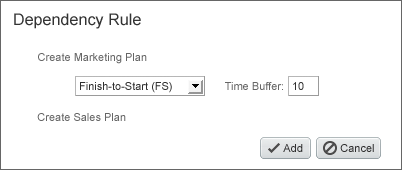
<style>
.page{position:relative;width:402px;height:170px;background:#ffffff}
.page>*{position:absolute;margin:0}
.t1{font:16px "ArialMT";letter-spacing:0.005em;color:#333333}
.t2{font:11px "ArialMT";color:#666666}
.t3{font:11px "ArialMT";color:#303030}
</style>
<div class="page">
<p class="t1" style="left:14px;top:13px;width:127px;height:16px">Dependency Rule</p>
<p class="t2" style="left:38px;top:53px;width:109px;height:11px">Create Marketing Plan</p>
<p class="t3" style="left:80px;top:82px;width:92px;height:11px">Finish-to-Start (FS)</p>
<p class="t2" style="left:225px;top:82px;width:58px;height:8px">Time Buffer:</p>
<p class="t3" style="left:293px;top:82px;width:11px;height:8px">10</p>
<p class="t2" style="left:37px;top:113px;width:89px;height:8px">Create Sales Plan</p>
<p class="t3" style="left:283px;top:144px;width:20px;height:8px">Add</p>
<p class="t3" style="left:340px;top:144px;width:34px;height:8px">Cancel</p>
</div>
